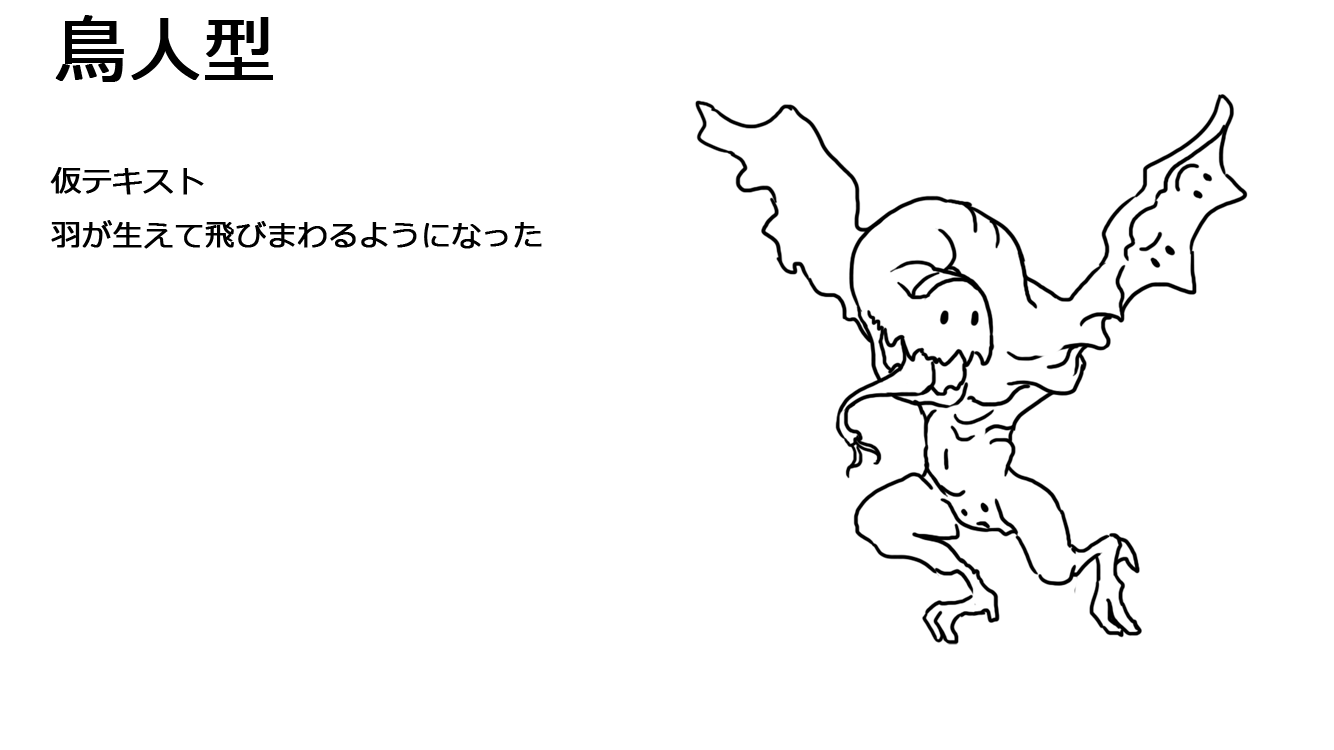
<style>
.page{position:relative;width:1334px;height:750px;background:#ffffff}
.page>*{position:absolute;margin:0}
.t1{font:72px "Meiryo";color:#000000;font-weight:bold}
.t2{font:30px "Meiryo";color:#000000;font-weight:bold}
</style>
<div class="page">
<p class="t1" style="left:55px;top:15px;width:218px;height:67px">鳥人型</p>
<p class="t2" style="left:50px;top:167px;width:492px;height:82px">仮テキスト<br>羽が生えて飛びまわるようになった</p>
</div>
